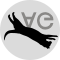
<style>
.page{position:relative;width:60px;height:60px;background:#dbdbdb}
.page>*{position:absolute;margin:0}
.t1{font:24.3px "Code-Pro-Demo";color:#8a8987}
</style>
<div class="page">
<p class="t1" style="left:21px;top:12px;width:33px;height:18px">ag</p>
</div>
